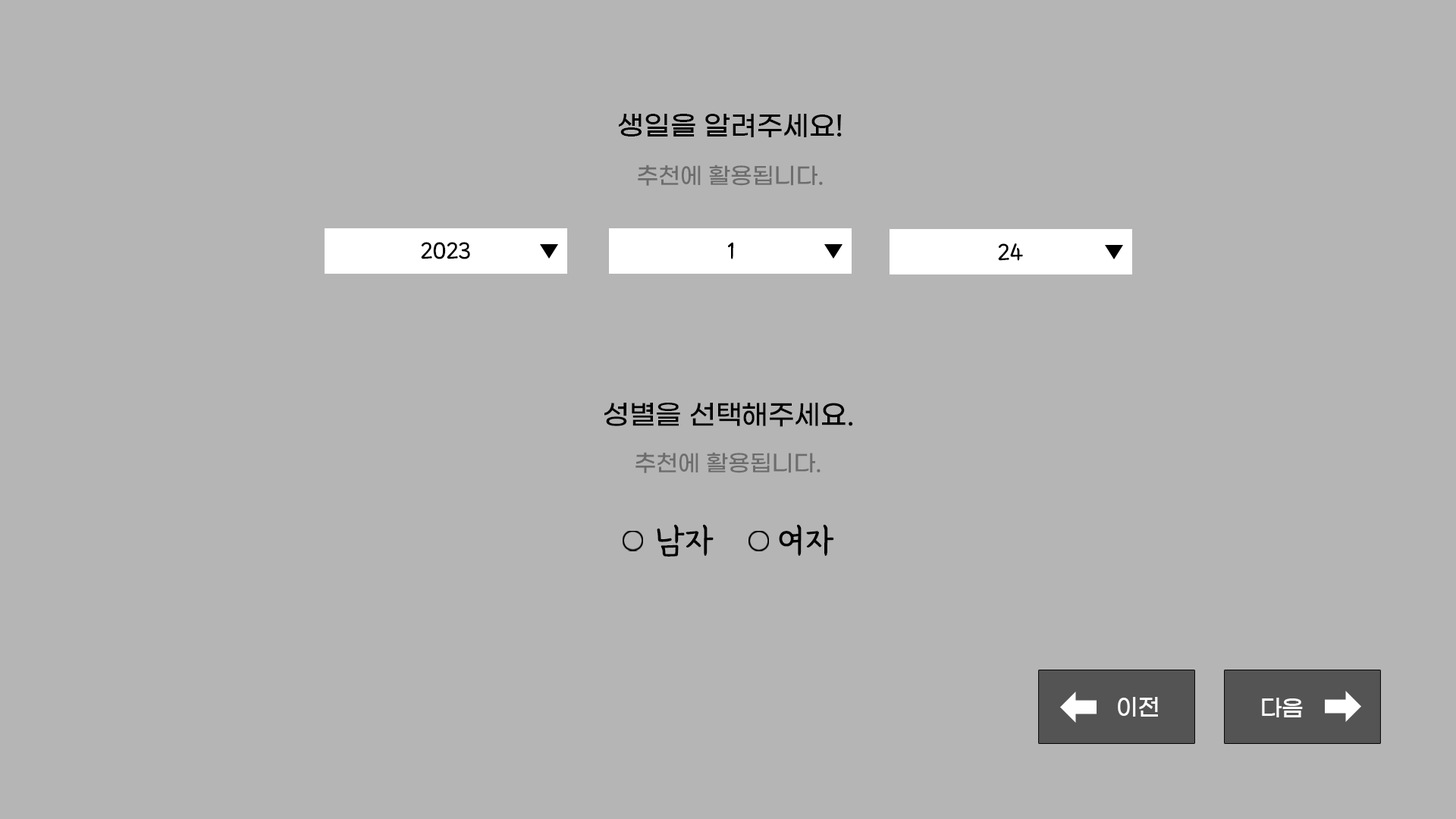
<style>
.page{position:relative;width:1456px;height:819px;background:#b5b5b5}
.page>*{position:absolute;margin:0}
.t1{font:27.3px "GmarketSansTTFMedium";color:#000000}
.t2{font:22.8px "GmarketSansTTFMedium";color:#6d6d6d}
.t3{font:27.3px "GangwonEduAllBold";color:#000000}
.t4{font:36.6px "GangwonEduAllBold";color:#000000}
.t5{font:36.5px "GangwonEduAllBold";color:#000000}
.t6{font:22.7px "GmarketSansTTFMedium";color:#ffffff}
</style>
<div class="page">
<p class="t1" style="left:619px;top:114px;width:223px;height:23px">생일을 알려주세요!</p>
<p class="t2" style="left:638px;top:165px;width:185px;height:21px">추천에 활용됩니다.</p>
<p class="t3" style="left:421px;top:242px;width:49px;height:17px">2023</p>
<p class="t3" style="left:728px;top:242px;width:5px;height:17px">1</p>
<p class="t3" style="left:998px;top:243px;width:25px;height:18px">24</p>
<p class="t1" style="left:604px;top:403px;width:249px;height:24px">성별을 선택해주세요.</p>
<p class="t2" style="left:635px;top:452px;width:186px;height:21px">추천에 활용됩니다.</p>
<p class="t4" style="left:657px;top:524px;width:57px;height:33px">남자</p>
<p class="t5" style="left:779px;top:524px;width:55px;height:32px">여자</p>
<p class="t6" style="left:1118px;top:697px;width:40px;height:20px">이전</p>
<p class="t6" style="left:1262px;top:698px;width:41px;height:19px">다음</p>
</div>
